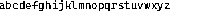
<style>
.page{position:relative;width:200px;height:12px;background:#ffffff}
.page>*{position:absolute;margin:0}
.t1{font:10.8px "CascadiaCode-Regular";color:#000000}
</style>
<div class="page">
<p class="t1" style="left:0px;top:0px;width:170px;height:11px">abcdefghijklmnopqrstuvwxyz</p>
</div>
